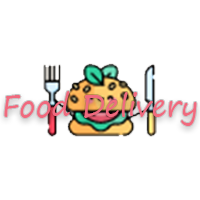
<style>
.page{position:relative;width:200px;height:200px;background:#ffffff}
.page>*{position:absolute;margin:0}
.t1{font:28.7px "SegoePrint";color:#f06a7e}
</style>
<div class="page">
<p class="t1" style="left:4px;top:91px;width:193px;height:35px">Food Delivery</p>
</div>
